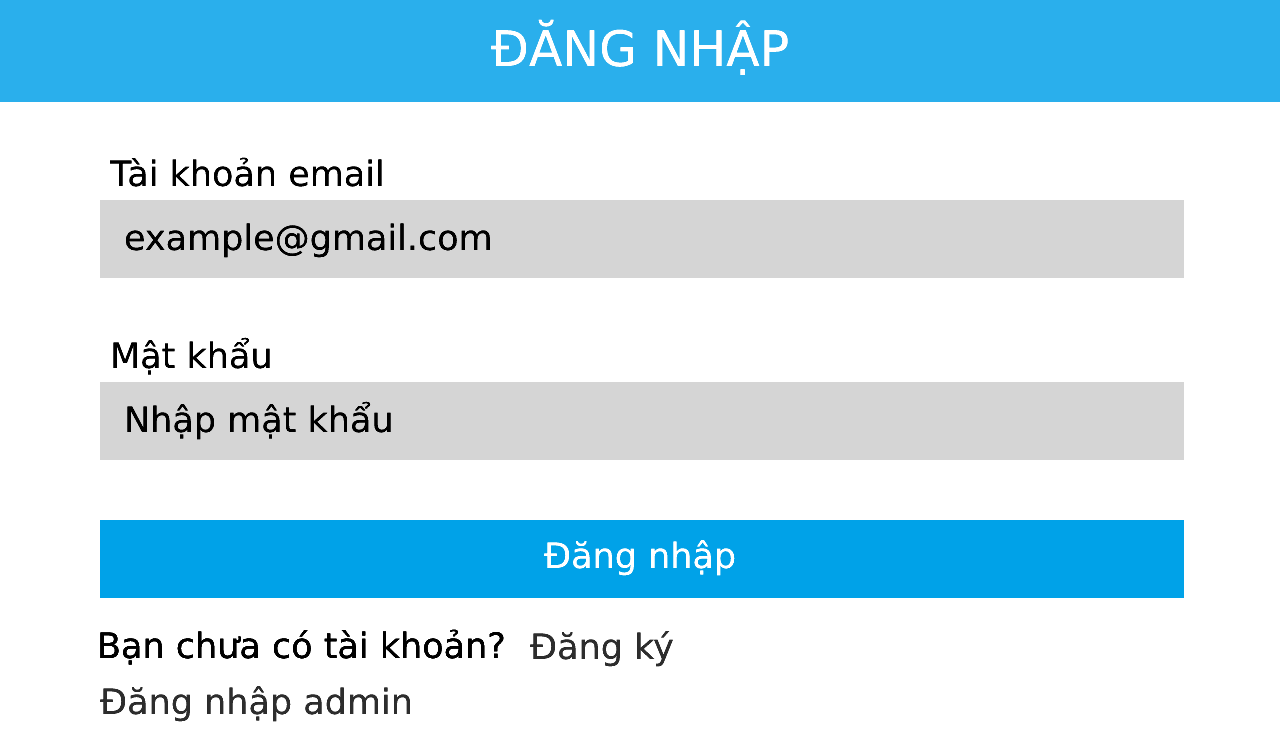
<style>
.page{position:relative;width:1280px;height:756px;background:#ffffff}
.page>*{position:absolute;margin:0}
.t1{font:49px "DejaVuSans";color:#ffffff}
.t2{font:35px "DejaVuSans";color:#000000}
.t3{font:35px "DejaVuSans";color:#ffffff}
.t4{font:35px "DejaVuSans";color:#2d2d2d}
</style>
<div class="page">
<p class="t1" style="left:491px;top:19px;width:297px;height:56px">ĐĂNG NHẬP</p>
<p class="t2" style="left:109px;top:157px;width:273px;height:30px">Tài khoản email</p>
<p class="t2" style="left:125px;top:223px;width:365px;height:35px">example@gmail.com</p>
<p class="t2" style="left:113px;top:337px;width:157px;height:38px">Mật khẩu</p>
<p class="t2" style="left:127px;top:401px;width:264px;height:39px">Nhập mật khẩu</p>
<p class="t3" style="left:544px;top:540px;width:191px;height:36px">Đăng nhập</p>
<p class="t2" style="left:100px;top:629px;width:404px;height:36px">Bạn chưa có tài khoản?</p>
<p class="t2" style="left:100px;top:629px;width:404px;height:36px">Bạn chưa có tài khoản?</p>
<p class="t4" style="left:530px;top:631px;width:143px;height:36px">Đăng ký</p>
<p class="t4" style="left:100px;top:686px;width:310px;height:36px">Đăng nhập admin</p>
</div>
